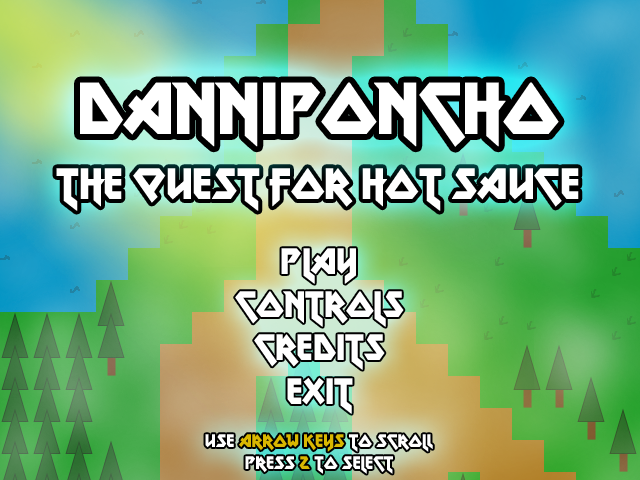
<style>
.page{position:relative;width:640px;height:480px}
.page>*{position:absolute;margin:0}
.t1{font:72.2px "MetalLord-Regular";color:#ffffff}
.t2{font:43.3px "MetalLord-Regular";color:#ffffff}
.t3{font:36px "MetalLord-Regular";color:#ffffff}
.t4{font:18px "MetalLord-Regular";color:#ffffff}
.t5{font:18px "MetalLord-Regular";color:#d9b700}
</style>
<div class="page">
<p class="t1" style="left:80px;top:82px;width:479px;height:65px">Danniponcho</p>
<p class="t2" style="left:56px;top:168px;width:523px;height:43px">The Quest for Hot Sauce</p>
<p class="t3" style="left:235px;top:248px;width:169px;height:166px;text-align:center">Play<br>Controls<br>Credits<br>Exit</p>
<p class="t4" style="left:205px;top:434px;width:228px;height:40px;text-align:center">Use <span class="t5">Arrow Keys</span> to scroll<br>Press <span class="t5">Z</span> to select</p>
</div>
